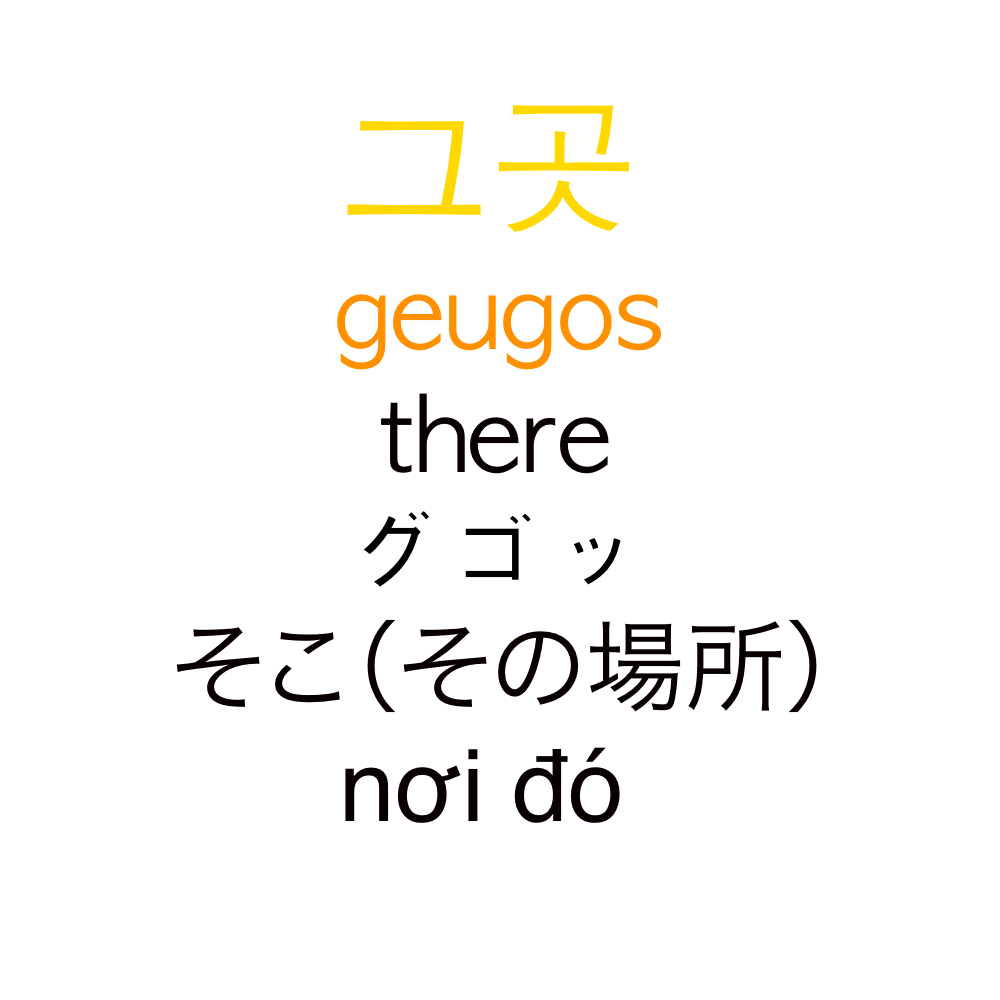
<style>
.page{position:relative;width:1000px;height:1000px;background:#ffffff}
.page>*{position:absolute;margin:0}
.t1{font:150px "AppleGothic";color:#ffd800}
.t2{font:100px "AppleGothic";color:#ff9000}
.t3{font:100px "AppleGothic";color:#080000}
.t4{font:100px "AppleGothic";color:#000000}
.t5{font:100px "HiraKakuProN-W3";color:#080000}
.t6{font:100px "Helvetica";color:#080000}
</style>
<div class="page">
<p class="t1" style="left:347px;top:105px;width:282px;height:127px">그곳</p>
<p class="t2" style="left:337px;top:294px;width:325px;height:76px">geugos</p>
<p class="t3" style="left:381px;top:393px;width:228px;height:81px">there</p>
<p class="t4" style="left:364px;top:511px;width:257px;height:76px">グゴッ</p>
<p class="t5" style="left:176px;top:619px;width:641px;height:94px">そこ（その場所）</p>
<p class="t6" style="left:345px;top:747px;width:275px;height:76px">nơi đó</p>
</div>
